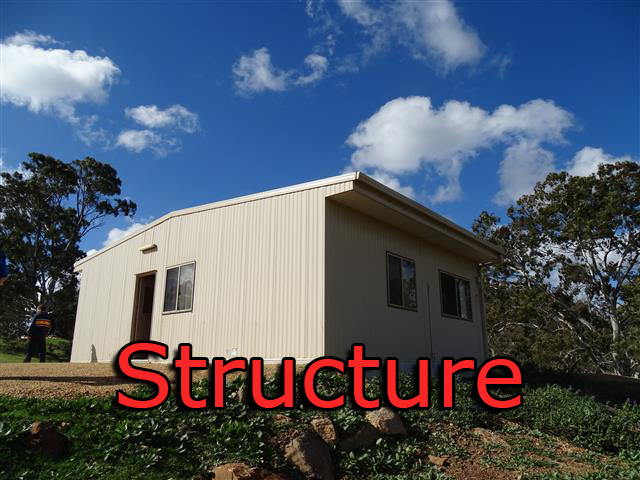
<style>
.page{position:relative;width:640px;height:480px}
.page>*{position:absolute;margin:0}
.t1{font:87.4px "Verdana";color:#f72727}
</style>
<div class="page">
<p class="t1" style="left:118px;top:343px;width:404px;height:65px">Structure</p>
</div>
